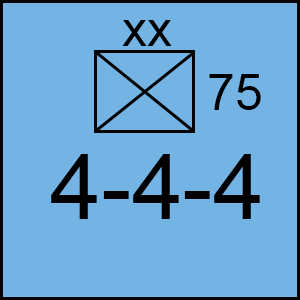
<style>
.page{position:relative;width:300px;height:300px;background:#74b4e4}
.page>*{position:absolute;margin:0}
.t1{font:50px "ArialMT";color:#000000}
.t2{font:91.7px "ArialMT";color:#000000}
</style>
<div class="page">
<p class="t1" style="left:122px;top:20px;width:50px;height:26px">xx</p>
<p class="t1" style="left:209px;top:74px;width:52px;height:36px">75</p>
<p class="t2" style="left:51px;top:154px;width:209px;height:65px">4-4-4</p>
</div>
